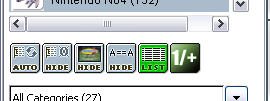
<style>
.page{position:relative;width:270px;height:101px;background:#ffffff}
.page>*{position:absolute;margin:0}
.t1{font:19px "Impact";color:#ffffff}
.t2{font:8px "LucidaConsole";letter-spacing:0.025em;color:#3e3009;font-weight:bold}
</style>
<div class="page">
<p class="t1" style="left:172px;top:49px;width:25px;height:17px">1/+</p>
<p class="t2" style="left:13px;top:65px;width:24px;height:5px">AUTO</p>
<p class="t2" style="left:46px;top:65px;width:22px;height:5px">HIDE</p>
<p class="t2" style="left:78px;top:65px;width:22px;height:5px">HIDE</p>
<p class="t2" style="left:110px;top:65px;width:22px;height:5px">HIDE</p>
<p class="t2" style="left:142px;top:65px;width:23px;height:5px">LIST</p>
</div>
